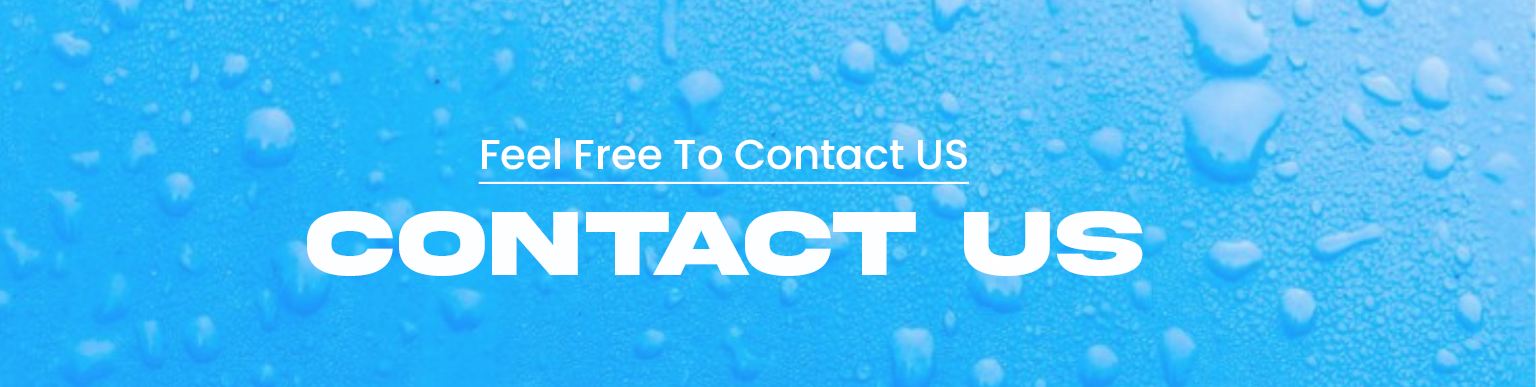
<style>
.page{position:relative;width:1536px;height:387px}
.page>*{position:absolute;margin:0}
.t1{font:41.7px "Poppins-Medium";color:#ffffff;text-decoration:underline}
.t2{font:95.8px "AkiraExpanded-SuperBold";color:#ffffff}
</style>
<div class="page">
<p class="t1" style="left:478px;top:138px;width:491px;height:46px">Feel Free To Contact US</p>
<p class="t2" style="left:307px;top:211px;width:836px;height:65px">CONTACT US</p>
</div>
